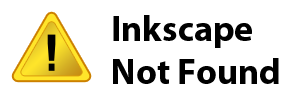
<style>
.page{position:relative;width:300px;height:100px;background:#ffffff}
.page>*{position:absolute;margin:0}
.t1{font:36px "MyriadPro-Bold";color:#000000}
</style>
<div class="page">
<p class="t1" style="left:113px;top:15px;width:166px;height:69px">Inkscape<br>Not Found</p>
</div>
